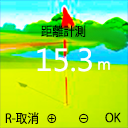
<style>
.page{position:relative;width:128px;height:128px}
.page>*{position:absolute;margin:0}
.t1{font:12.3px "KozGoPr6N-Regular";color:#000000;scale:0.91 1}
.t2{font:31.7px "MicrosoftNewTaiLue";color:#ffffff}
.t3{font:16px "MicrosoftNewTaiLue";color:#ffffff}
.t4{font:12.3px "KozGoPr6N-Regular";color:#000000;scale:0.95 1}
.t5{font:12px "KozGoPr6N-Regular";color:#000000}
.t6{font:12px "KozGoPr6N-Regular";color:#000000;scale:0.96 1}
</style>
<div class="page">
<p class="t1" style="left:41px;top:25px;width:45px;height:12px">距離計測</p>
<p class="t2" style="left:37px;top:48px;width:55px;height:24px">15.3</p>
<p class="t3" style="left:98px;top:61px;width:12px;height:9px">m</p>
<p class="t4" style="left:5px;top:112px;width:34px;height:12px">R-取消</p>
<p class="t5" style="left:79px;top:113px;width:10px;height:10px">⊖</p>
<p class="t5" style="left:105px;top:112px;width:16px;height:11px">OK</p>
<p class="t6" style="left:47px;top:114px;width:10px;height:9px">⊕</p>
</div>
